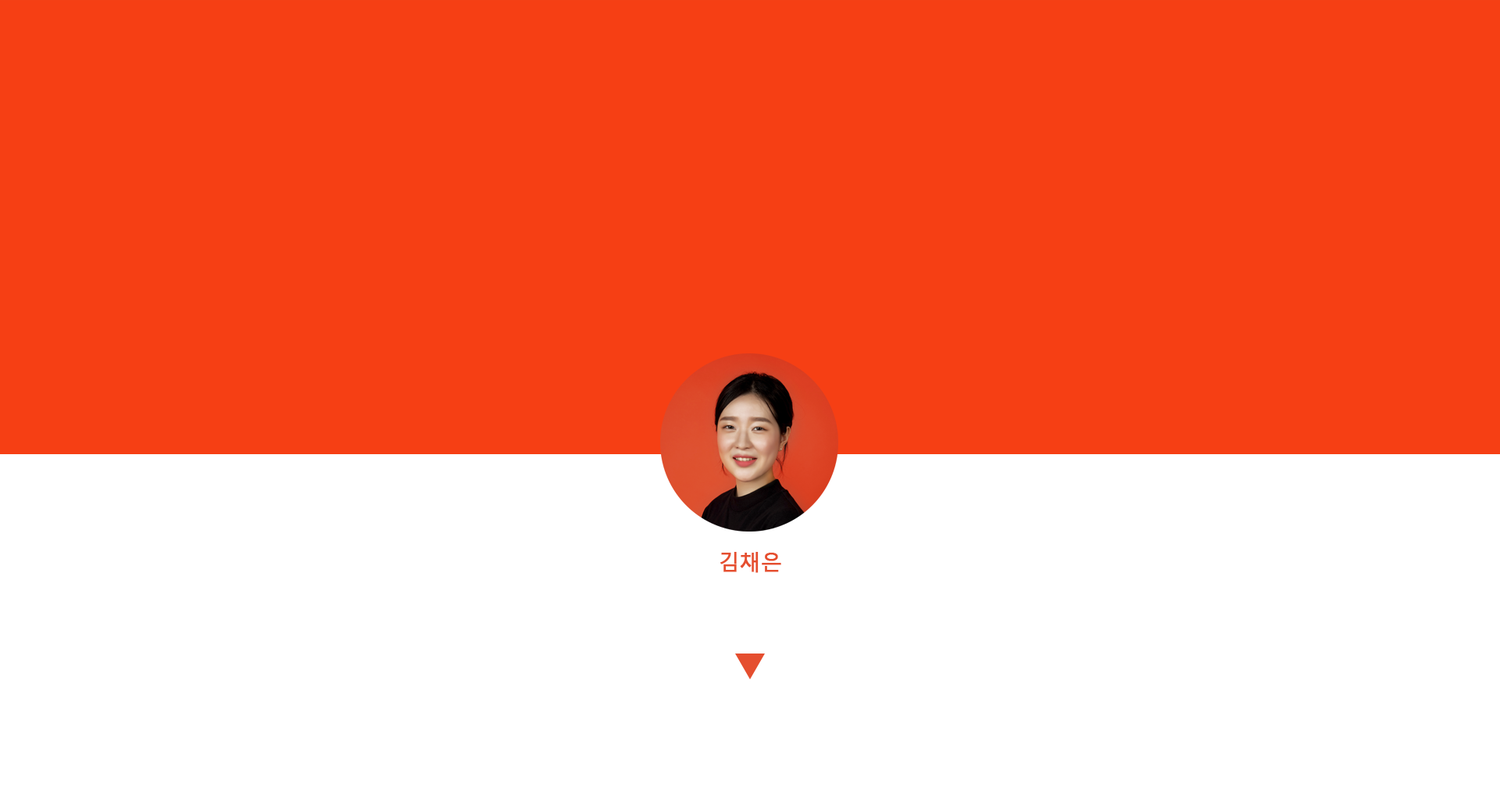
<style>
.page{position:relative;width:1500px;height:795px;background:#f63f14}
.page>*{position:absolute;margin:0}
.t1{font:20.8px "MalgunGothic";color:#e54e2f;font-weight:bold}
</style>
<div class="page">
<p class="t1" style="left:721px;top:552px;width:60px;height:21px">김채은</p>
</div>
